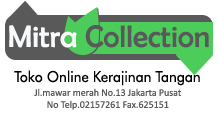
<style>
.page{position:relative;width:219px;height:116px;background:#ffffff}
.page>*{position:absolute;margin:0}
.t1{font:31.2px "BerlinSansFB-Reg";color:#5a5959}
.t2{font:31.2px "BerlinSansFB-Reg";color:#f8f9fb}
.t3{font:15px "FuturaBT-Book";color:#000000;scale:0.93 1}
.t4{font:10px "Calibri";color:#5a5959}
</style>
<div class="page">
<p class="t1" style="left:9px;top:25px;width:200px;height:23px"><span class="t2">Mitra </span>Collection</p>
<p class="t3" style="left:14px;top:70px;width:186px;height:16px">Toko Online Kerajinan Tangan</p>
<p class="t4" style="left:34px;top:88px;width:147px;height:22px;text-align:center">Jl.mawar merah No.13 Jakarta Pusat<br>No Telp.02157261 Fax.625151</p>
</div>
